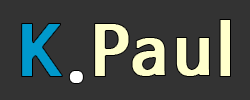
<style>
.page{position:relative;width:250px;height:100px;background:#333333}
.page>*{position:absolute;margin:0}
.t1{font:72px "NanumGothicExtraBold";color:#ffffcc;font-weight:bold}
.t2{font:72px "NanumGothicExtraBold";color:#0099cc;font-weight:bold}
.t3{font:72px "NanumGothicExtraBold";color:#ffffff;font-weight:bold}
</style>
<div class="page">
<p class="t1" style="left:21px;top:19px;width:210px;height:65px"><span class="t2">K</span><span class="t3">.</span>Paul</p>
</div>
